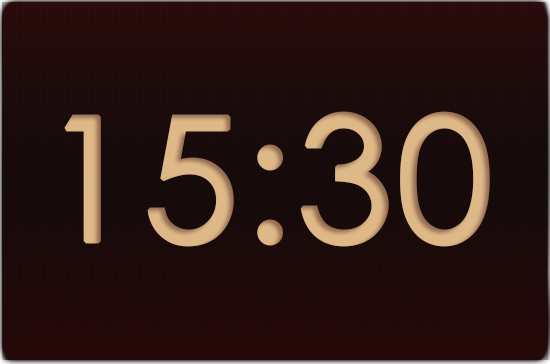
<style>
.page{position:relative;width:550px;height:364px}
.page>*{position:absolute;margin:0}
.t1{font:173.4px "CenturyGothic";color:#deb887;text-transform:uppercase;font-weight:bold}
</style>
<div class="page">
<p class="t1" style="left:64px;top:111px;width:426px;height:136px">15:30</p>
</div>
